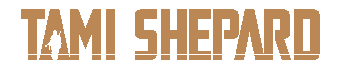
<style>
.page{position:relative;width:348px;height:73px;background:#ffffff}
.page>*{position:absolute;margin:0}
.t1{font:72px "MandaloreLaser";letter-spacing:-0.05em;color:#bb8855}
</style>
<div class="page">
<p class="t1" style="left:21px;top:9px;width:80px;height:51px">TAM</p>
<p class="t1" style="left:106px;top:9px;width:9px;height:51px">I</p>
<p class="t1" style="left:135px;top:9px;width:22px;height:51px">S</p>
<p class="t1" style="left:161px;top:9px;width:26px;height:51px">H</p>
<p class="t1" style="left:189px;top:9px;width:22px;height:51px">E</p>
<p class="t1" style="left:213px;top:9px;width:78px;height:51px">Par</p>
<p class="t1" style="left:294px;top:9px;width:26px;height:51px">D</p>
</div>
